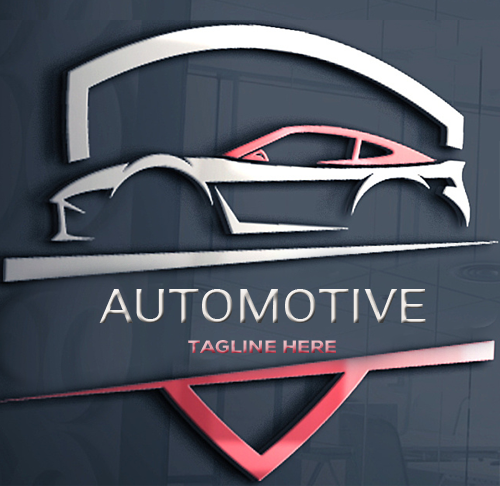
<style>
.page{position:relative;width:500px;height:486px}
.page>*{position:absolute;margin:0}
.t1{font:48px "Roboto-Regular";scale:1.1 1}
.t2{font:18px "NexaHeavy";scale:1.1 1}
</style>
<div class="page">
<p class="t1" style="left:99px;top:289px;width:327px;height:34px">AUTOMOTIVE</p>
<p class="t2" style="left:188px;top:340px;width:148px;height:14px">TAGLINE HERE</p>
</div>
